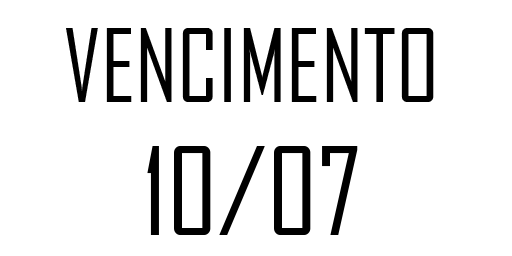
<style>
.page{position:relative;width:512px;height:256px;background:#ffffff}
.page>*{position:absolute;margin:0}
.t1{font:97.1px "AgencyFB-Reg";color:#000000}
.t2{font:116.4px "AgencyFB-Reg";color:#000000}
</style>
<div class="page">
<p class="t1" style="left:66px;top:28px;width:368px;height:74px">VENCIMENTO</p>
<p class="t2" style="left:147px;top:146px;width:211px;height:89px">10/07</p>
</div>
